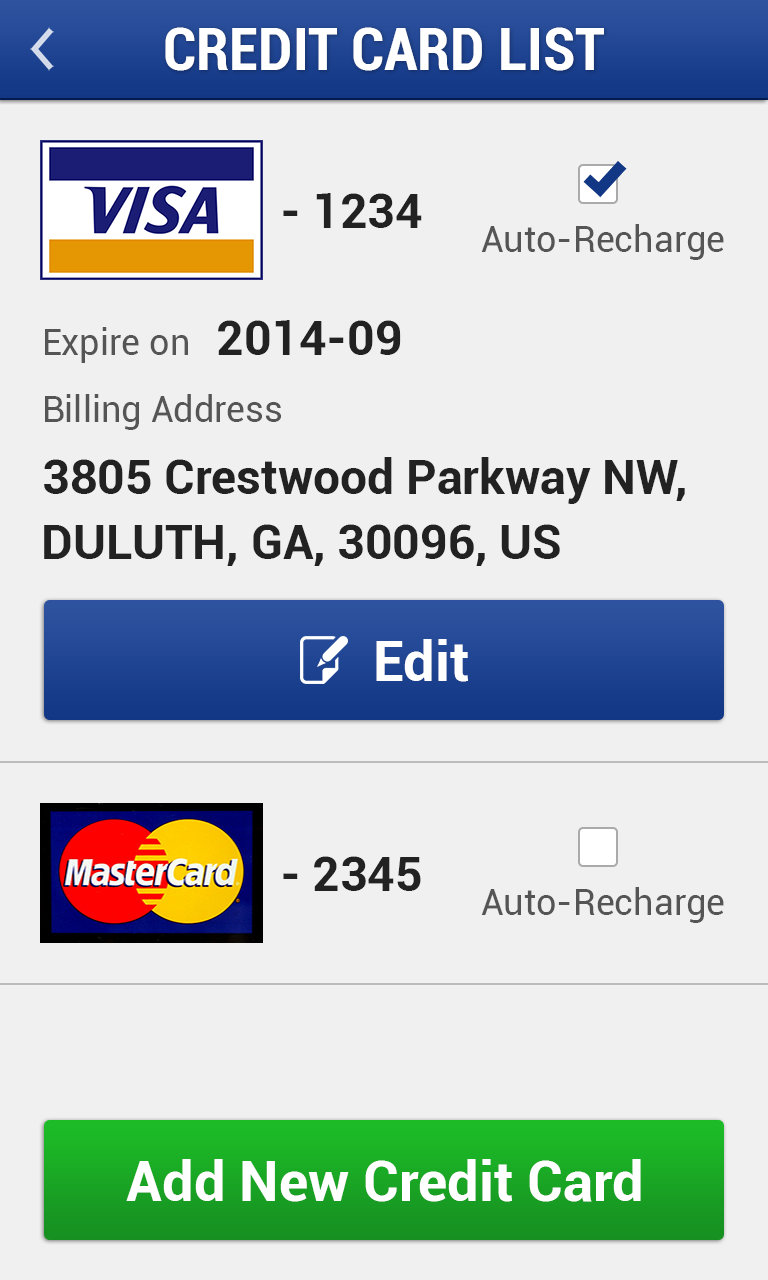
<style>
.page{position:relative;width:768px;height:1280px;background:#f0f0f0}
.page>*{position:absolute;margin:0}
.t1{font:60px "Roboto-BoldCondensed";color:#ffffff}
.t2{font:48px "Roboto-Bold";color:#222222}
.t3{font:36px "Roboto-Regular";color:#555555}
.t4{font:56px "Roboto-Bold";color:#ffffff}
</style>
<div class="page">
<p class="t1" style="left:165px;top:27px;width:439px;height:44px">CREDIT CARD LIST</p>
<p class="t2" style="left:283px;top:193px;width:139px;height:35px">- 1234</p>
<p class="t3" style="left:481px;top:224px;width:243px;height:36px">Auto-Recharge</p>
<p class="t3" style="left:45px;top:327px;width:143px;height:36px">Expire on</p>
<p class="t2" style="left:218px;top:320px;width:183px;height:35px">2014-09</p>
<p class="t3" style="left:45px;top:394px;width:236px;height:36px">Billing Address</p>
<p class="t2" style="left:44px;top:457px;width:641px;height:47px">3805 Crestwood Parkway NW,</p>
<p class="t2" style="left:44px;top:524px;width:516px;height:42px">DULUTH, GA, 30096, US</p>
<p class="t4" style="left:376px;top:639px;width:92px;height:43px">Edit</p>
<p class="t2" style="left:283px;top:856px;width:138px;height:35px">- 2345</p>
<p class="t3" style="left:481px;top:887px;width:243px;height:36px">Auto-Recharge</p>
<p class="t4" style="left:126px;top:1159px;width:515px;height:43px">Add New Credit Card</p>
</div>
